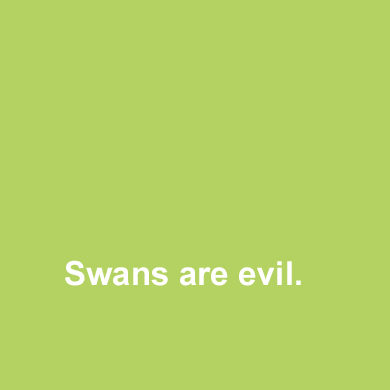
<style>
.page{position:relative;width:390px;height:390px;background:#b4d261}
.page>*{position:absolute;margin:0}
.t1{font:33.3px "Arial-BoldMT";color:#ffffff}
</style>
<div class="page">
<p class="t1" style="left:65px;top:260px;width:236px;height:26px">Swans are evil.</p>
</div>
